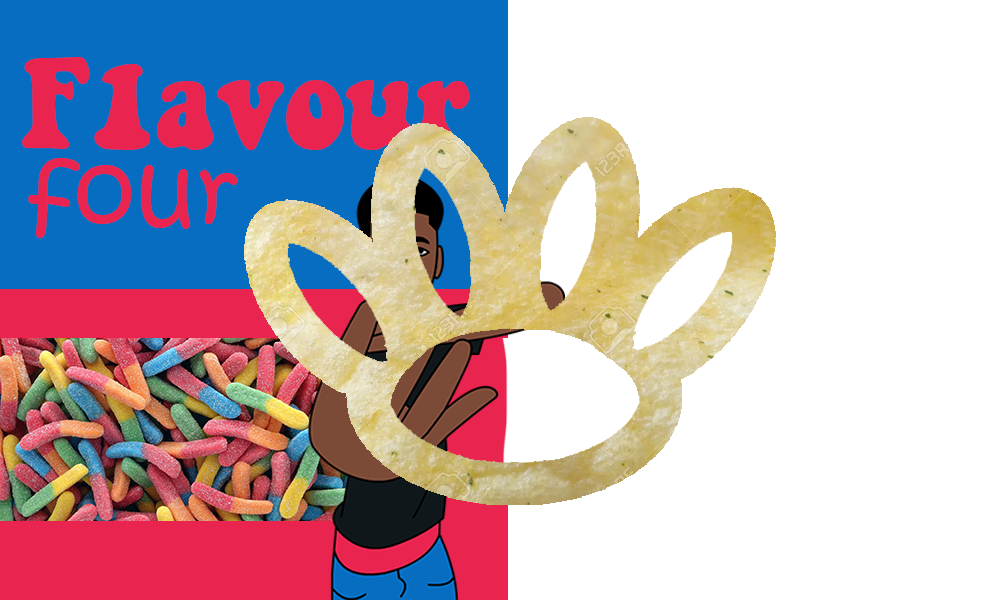
<style>
.page{position:relative;width:1000px;height:600px;background:#ffffff}
.page>*{position:absolute;margin:0}
.t1{font:118.8px "KeeponTruckin";color:#e8244f}
.t2{font:95.9px "KristenITC-Regular";color:#e8244f}
</style>
<div class="page">
<p class="t1" style="left:22px;top:57px;width:448px;height:93px">F1avour</p>
<p class="t2" style="left:28px;top:158px;width:210px;height:80px">four</p>
</div>
